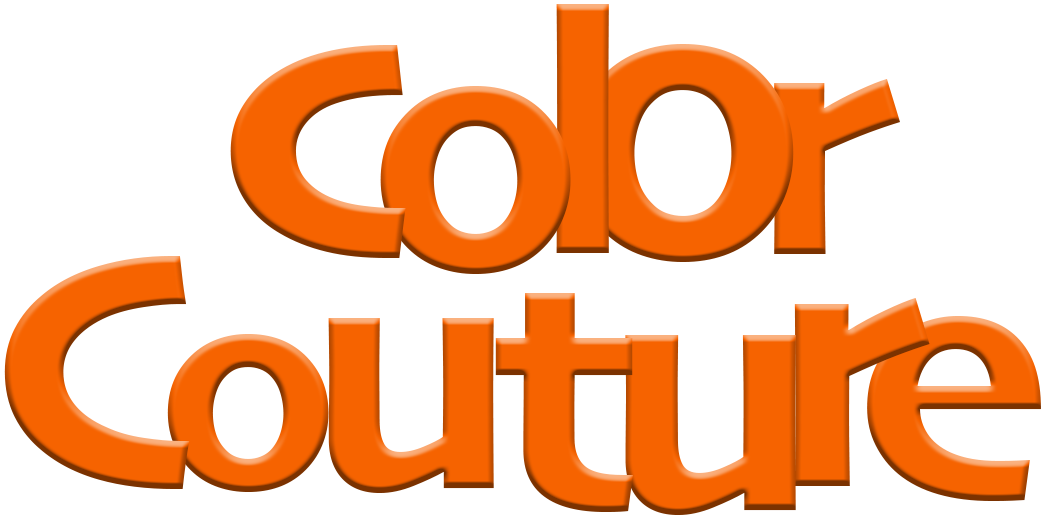
<style>
.page{position:relative;width:1045px;height:519px;background:#ffffff}
.page>*{position:absolute;margin:0}
.t1{font:348.5px "Skia-Bold";color:#f66300}
.t2{font:420.6px "Skia-Bold";color:#f66300}
.t3{font:415.1px "Skia-Bold";color:#f66300}
.t4{font:357.2px "Skia-Bold";color:#f66300}
.t5{font:341.8px "Skia-Bold";color:#f66300}
.t6{font:348.7px "Skia-Bold";color:#f66300}
.t7{font:344.2px "Skia-Bold";color:#f66300}
.t8{font:366.4px "Skia-Bold";color:#f66300}
.t9{font:341.1px "Skia-Bold";color:#f66300}
.t10{font:356.9px "Skia-Bold";color:#f66300}
.t11{font:301.8px "Skia-Bold";color:#f66300}
.t12{font:352.3px "Skia-Bold";color:#f66300}
</style>
<div class="page">
<p class="t1" style="left:556px;top:4px;width:53px;height:249px">l</p>
<p class="t2" style="left:230px;top:45px;width:176px;height:213px">c</p>
<p class="t3" style="left:572px;top:44px;width:222px;height:218px">o</p>
<p class="t4" style="left:380px;top:86px;width:191px;height:188px">o</p>
<p class="t5" style="left:774px;top:79px;width:126px;height:175px">r</p>
<p class="t6" style="left:4px;top:256px;width:186px;height:233px">C</p>
<p class="t7" style="left:495px;top:293px;width:138px;height:219px">t</p>
<p class="t8" style="left:794px;top:298px;width:136px;height:188px">r</p>
<p class="t9" style="left:328px;top:318px;width:166px;height:175px">u</p>
<p class="t10" style="left:867px;top:316px;width:174px;height:185px">e</p>
<p class="t11" style="left:167px;top:334px;width:162px;height:158px">o</p>
<p class="t12" style="left:625px;top:335px;width:171px;height:180px">u</p>
</div>
